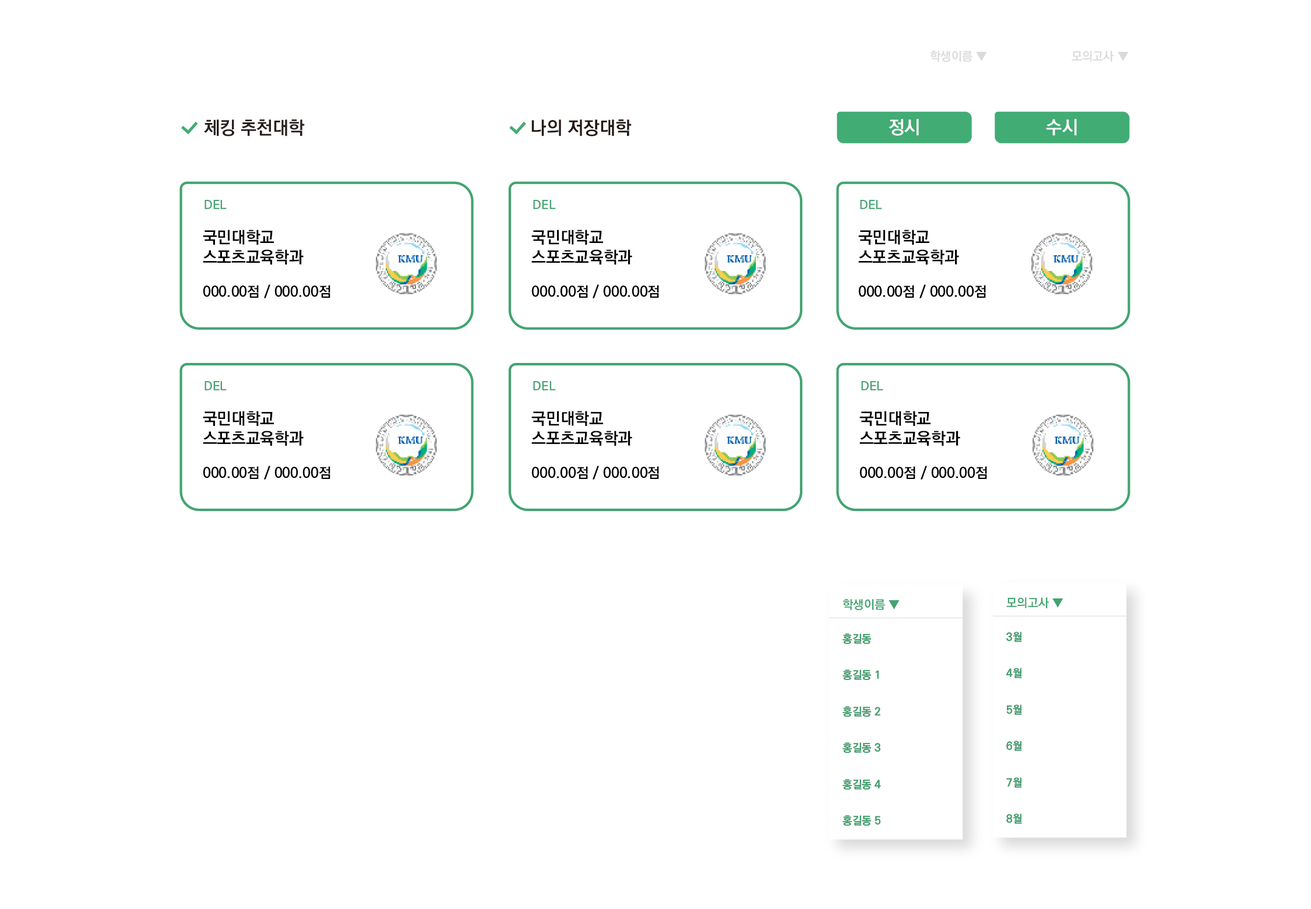
<style>
.page{position:relative;width:1311px;height:909px;background:#ffffff}
.page>*{position:absolute;margin:0}
.t1{font:12.1px "KoPubWorldDotumPB";color:#dadbdb}
.t2{font:18.2px "KoPubWorldDotumPB";color:#281f1d}
.t3{font:18.2px "KoPubWorldDotumPB";color:#291f1d}
.t4{font:18.2px "KoPubWorldDotumPB";color:#221814}
.t5{font:18.2px "KoPubWorldDotumPB";color:#231815}
.t6{font:18.2px "KoPubWorldDotumPB";color:#ffffff}
.t7{font:12.1px "KoPubWorldDotumPB";color:#41a470;text-transform:uppercase}
.t8{font:12.1px "KoPubWorldDotumPB";color:#42a470;text-transform:uppercase}
.t9{font:14.2px "KoPubWorldDotumPB";color:#000000}
.t10{font:16.4px "KoPubWorldDotumPB";color:#000000}
.t11{font:12.1px "KoPubWorldDotumPB";color:#42a470}
.t12{font:10.9px/36.4px "KoPubWorldDotumPB";color:#41a470}
.t13{font:10.9px/36.4px "KoPubWorldDotumPB";color:#42a470}
</style>
<div class="page">
<p class="t1" style="left:931px;top:51px;width:56px;height:11px">학생이름 ▼</p>
<p class="t1" style="left:1072px;top:51px;width:57px;height:11px">모의고사 ▼</p>
<p class="t2" style="left:204px;top:119px;width:101px;height:17px">체킹 추천대학</p>
<p class="t3" style="left:204px;top:119px;width:101px;height:17px">체킹 추천대학</p>
<p class="t4" style="left:532px;top:119px;width:100px;height:17px">나의 저장대학</p>
<p class="t5" style="left:532px;top:119px;width:100px;height:17px">나의 저장대학</p>
<p class="t6" style="left:889px;top:119px;width:30px;height:17px">정시</p>
<p class="t6" style="left:889px;top:119px;width:30px;height:17px">정시</p>
<p class="t6" style="left:1046px;top:119px;width:31px;height:17px">수시</p>
<p class="t6" style="left:1046px;top:119px;width:31px;height:17px">수시</p>
<p class="t7" style="left:205px;top:200px;width:22px;height:9px">Del</p>
<p class="t8" style="left:205px;top:200px;width:22px;height:9px">Del</p>
<p class="t7" style="left:533px;top:200px;width:23px;height:9px">Del</p>
<p class="t8" style="left:533px;top:200px;width:23px;height:9px">Del</p>
<p class="t7" style="left:860px;top:200px;width:22px;height:9px">Del</p>
<p class="t8" style="left:860px;top:200px;width:22px;height:9px">Del</p>
<p class="t9" style="left:203px;top:230px;width:127px;height:68px"><span class="t10">국민대학교 <br>스포츠교육학과<br></span><br>000.00점 / 000.00점</p>
<p class="t9" style="left:532px;top:230px;width:127px;height:68px"><span class="t10">국민대학교 <br>스포츠교육학과<br></span><br>000.00점 / 000.00점</p>
<p class="t9" style="left:859px;top:230px;width:127px;height:68px"><span class="t10">국민대학교 <br>스포츠교육학과<br></span><br>000.00점 / 000.00점</p>
<p class="t7" style="left:205px;top:381px;width:22px;height:10px">Del</p>
<p class="t8" style="left:205px;top:381px;width:22px;height:10px">Del</p>
<p class="t7" style="left:533px;top:381px;width:23px;height:10px">Del</p>
<p class="t8" style="left:533px;top:381px;width:23px;height:10px">Del</p>
<p class="t7" style="left:861px;top:381px;width:23px;height:10px">Del</p>
<p class="t8" style="left:861px;top:381px;width:23px;height:10px">Del</p>
<p class="t9" style="left:203px;top:411px;width:127px;height:69px"><span class="t10">국민대학교 <br>스포츠교육학과<br></span><br>000.00점 / 000.00점</p>
<p class="t9" style="left:532px;top:411px;width:127px;height:69px"><span class="t10">국민대학교 <br>스포츠교육학과<br></span><br>000.00점 / 000.00점</p>
<p class="t9" style="left:860px;top:411px;width:127px;height:69px"><span class="t10">국민대학교 <br>스포츠교육학과<br></span><br>000.00점 / 000.00점</p>
<p class="t11" style="left:843px;top:599px;width:57px;height:11px">학생이름 ▼</p>
<p class="t11" style="left:1007px;top:597px;width:57px;height:12px">모의고사 ▼</p>
<p class="t12" style="left:843px;top:634px;width:38px;height:192px">홍길동<br>홍길동 1<br>홍길동 2<br>홍길동 3<br>홍길동 4<br>홍길동 5</p>
<p class="t13" style="left:843px;top:634px;width:38px;height:192px">홍길동<br>홍길동 1<br>홍길동 2<br>홍길동 3<br>홍길동 4<br>홍길동 5</p>
<p class="t12" style="left:1007px;top:632px;width:15px;height:192px">3월<br>4월<br>5월<br>6월<br>7월<br>8월</p>
<p class="t13" style="left:1007px;top:632px;width:15px;height:192px">3월<br>4월<br>5월<br>6월<br>7월<br>8월</p>
</div>
